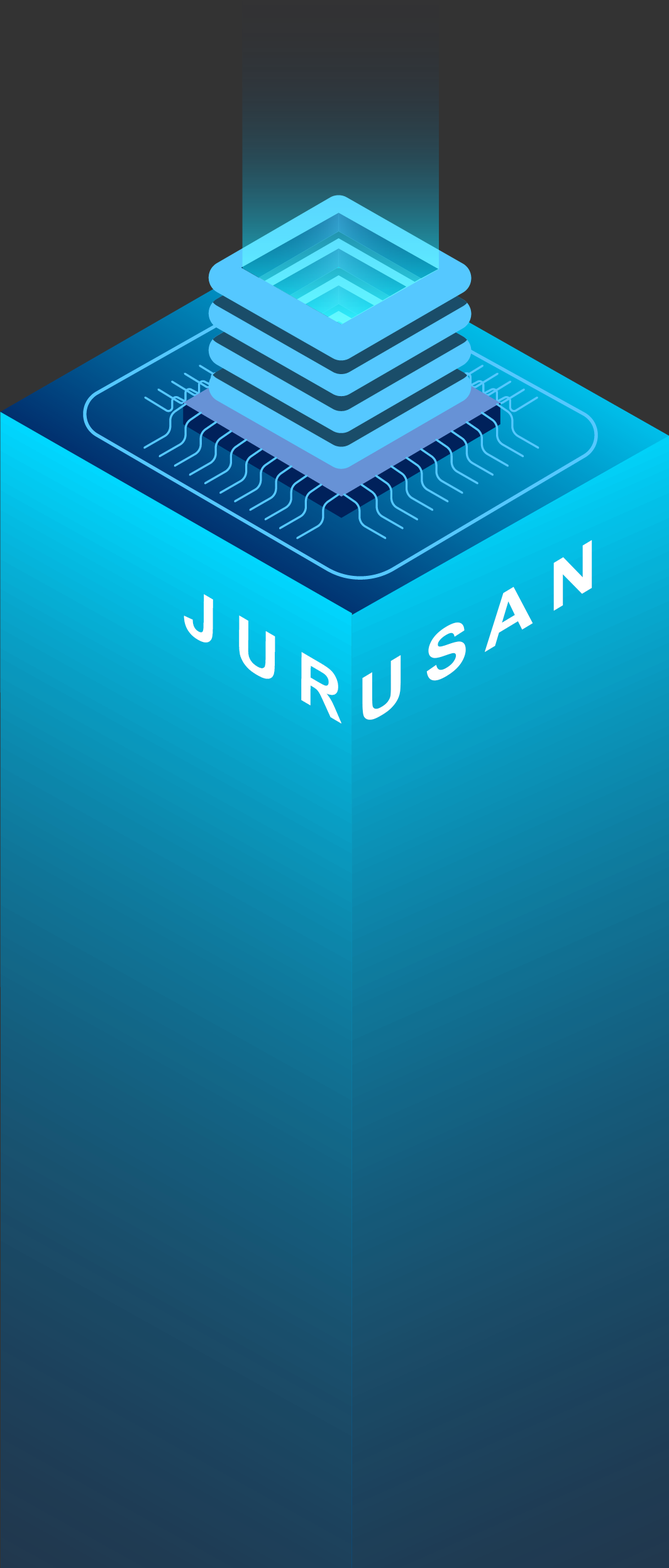
<style>
.page{position:relative;width:669px;height:1568px}
.page>*{position:absolute;margin:0}
.t1{font:66.6px "Arial-BoldMT";color:#ffffff;scale:1.17 1}
.t2{font:66.7px "Arial-BoldMT";color:#ffffff;scale:1.08 1}
</style>
<div class="page">
<p class="t1" style="left:362px;top:540px;width:230px;height:180px;rotate:-31deg">U S A N</p>
<p class="t2" style="left:184px;top:594px;width:157px;height:130px;rotate:30deg">J U R</p>
</div>
